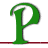
<style>
.page{position:relative;width:48px;height:48px;background:#ffffff}
.page>*{position:absolute;margin:0}
.t1{font:40.6px "Darkenstone";letter-spacing:0.08em;color:#1c8a13;font-variant:small-caps;scale:0.86 1}
</style>
<div class="page">
<p class="t1" style="left:10px;top:3px;width:30px;height:41px">P</p>
</div>
